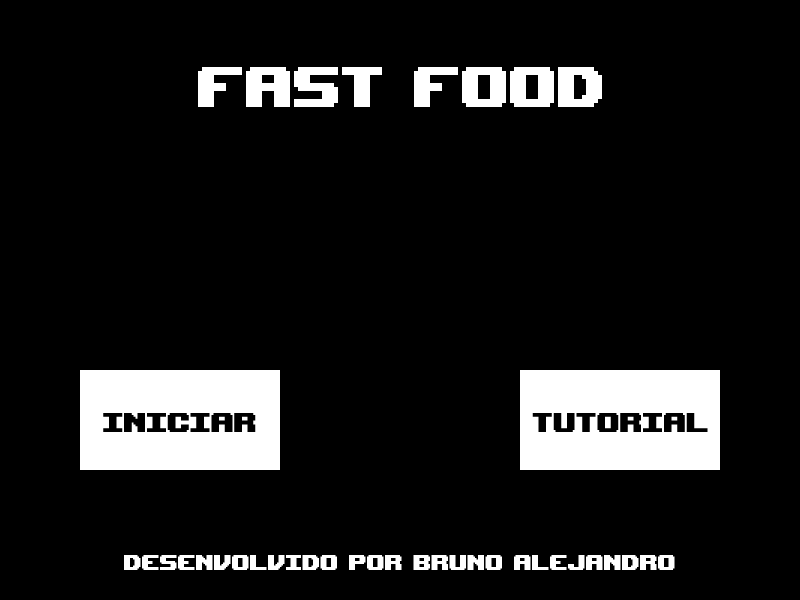
<style>
.page{position:relative;width:800px;height:600px;background:#000000}
.page>*{position:absolute;margin:0}
.t1{font:80px "UpheavalTT-BRK-";color:#ffffff}
.t2{font:38px "UpheavalTT-BRK-";color:#000000}
.t3{font:30px "UpheavalTT-BRK-";color:#ffffff}
</style>
<div class="page">
<p class="t1" style="left:198px;top:67px;width:404px;height:40px">FAST FOOD</p>
<p class="t2" style="left:103px;top:412px;width:153px;height:21px">INICIAR</p>
<p class="t2" style="left:532px;top:412px;width:176px;height:21px">TUTORIAL</p>
<p class="t3" style="left:124px;top:555px;width:551px;height:15px">DESENVOLVIDO POR BRUNO ALEJANDRO</p>
</div>
